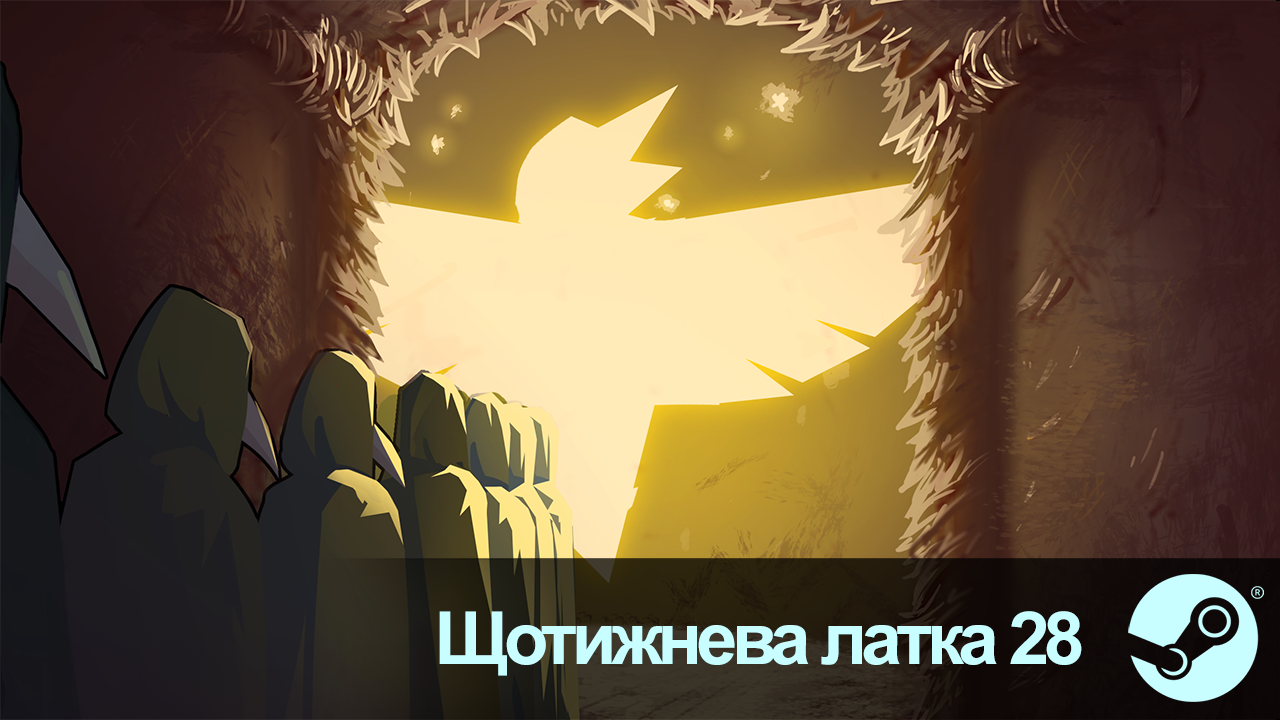
<style>
.page{position:relative;width:1280px;height:720px}
.page>*{position:absolute;margin:0}
.t1{font:73.3px "Arial-BoldMT";letter-spacing:-0.075em;color:#c8feff}
</style>
<div class="page">
<p class="t1" style="left:439px;top:611px;width:643px;height:65px">Щотижнева латка 28</p>
</div>
